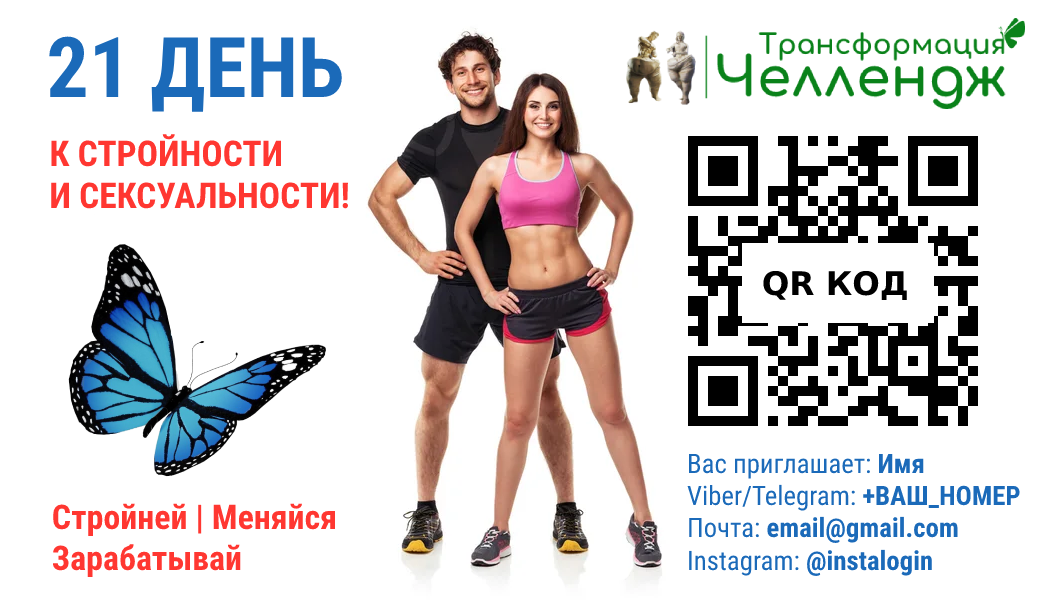
<style>
.page{position:relative;width:1050px;height:600px;background:#ffffff}
.page>*{position:absolute;margin:0}
.t1{font:83.8px "RobotoCondensed-Bold";color:#1b6ab9}
.t2{font:35.4px "RobotoCondensed-Bold";color:#ff3731}
.t3{font:26.8px "RobotoCondensed-Regular";color:#1b6ab9}
.t4{font:26.8px "RobotoCondensed-Bold";color:#1b6ab9}
.t5{font:34px "RobotoCondensed-Bold";color:#ff3731}
</style>
<div class="page">
<p class="t1" style="left:49px;top:36px;width:293px;height:76px">21 ДЕНЬ</p>
<p class="t2" style="left:51px;top:134px;width:297px;height:75px">К СТРОЙНОСТИ <br>И СЕКСУАЛЬНОСТИ!</p>
<p class="t3" style="left:687px;top:453px;width:333px;height:123px">Вас приглашает: <span class="t4">Имя<br></span>Viber/Telegram: <span class="t4">+ВАШ_НОМЕР<br></span>Почта: <span class="t4">email@gmail.com<br></span>Instagram: <span class="t4">@instalogin</span></p>
<p class="t5" style="left:52px;top:503px;width:283px;height:74px">Стройней | Меняйся<br>Зарабатывай</p>
</div>
